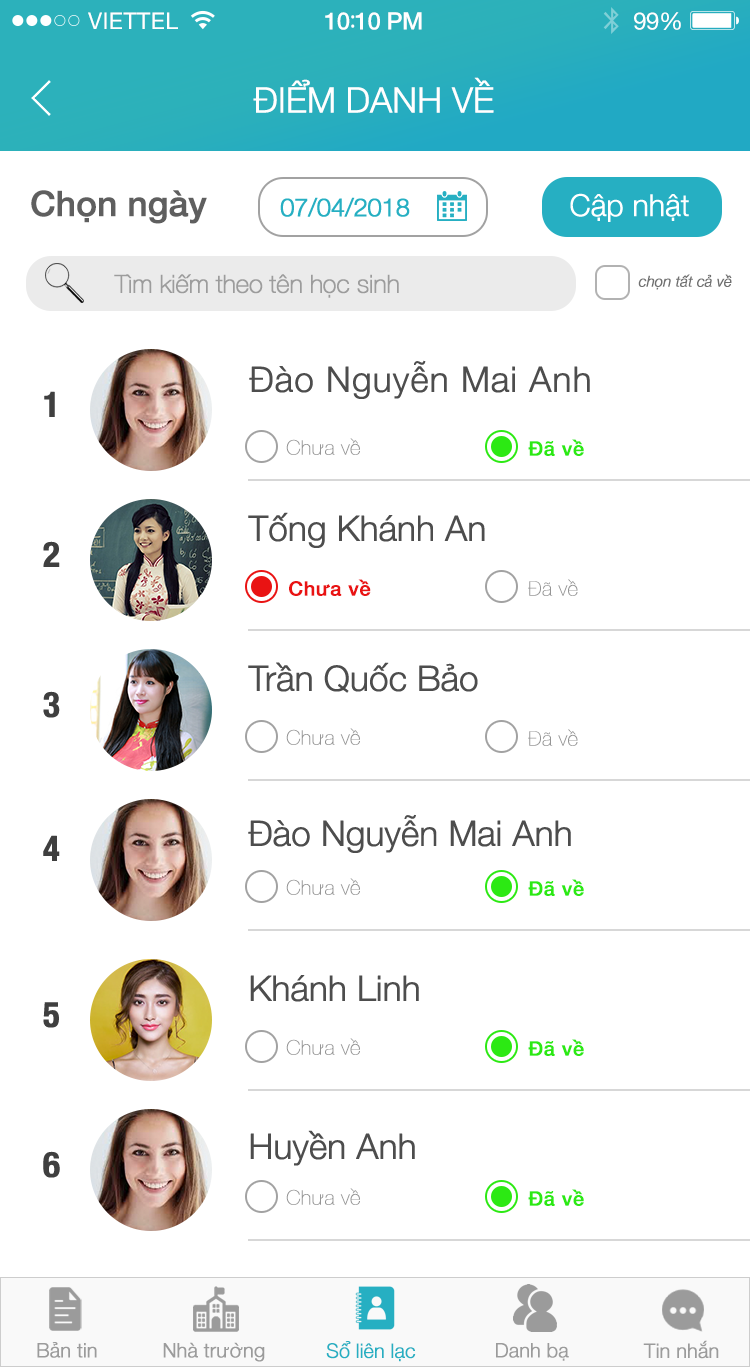
<style>
.page{position:relative;width:750px;height:1367px;background:#ffffff}
.page>*{position:absolute;margin:0}
.t1{font:23px "HelveticaNeue";letter-spacing:0.02em;color:#ffffff}
.t2{font:24px "HelveticaNeue-Medium";letter-spacing:-0.02em;color:#ffffff}
.t3{font:26px "MyriadPro-Regular";letter-spacing:-0.02em;color:#ffffff}
.t4{font:24px "HelveticaNeue";letter-spacing:-0.02em;color:#ffffff}
.t5{font:35px "HelveticaNeue-Light";letter-spacing:-0.02em;color:#ffffff;font-weight:bold}
.t6{font:35px "HelveticaNeue-Medium";letter-spacing:-0.02em;color:#5f5f5f;font-weight:bold}
.t7{font:25px "HelveticaNeue-Light";letter-spacing:-0.02em;color:#26afc2;font-weight:bold}
.t8{font:30px "HelveticaNeue-Light";letter-spacing:-0.02em;color:#ffffff;font-weight:bold}
.t9{font:25px "HelveticaNeue-Thin";letter-spacing:-0.02em;color:#9c9c9c;font-weight:bold}
.t10{font:15px "HelveticaNeue-LightItalic";letter-spacing:-0.02em;color:#707070;font-weight:bold}
.t11{font:35px "HelveticaNeue-Light";letter-spacing:0.01em;color:#4d4d4d;font-weight:bold}
.t12{font:35px "HelveticaNeue-CondensedBold";letter-spacing:0.01em;color:#3f3f3f;font-weight:bold}
.t13{font:20px "HelveticaNeue-UltraLight";letter-spacing:0.01em;color:#959595;font-weight:bold}
.t14{font:20px "HelveticaNeue-Medium";letter-spacing:0.01em;color:#2ce913;font-weight:bold}
.t15{font:35px "HelveticaNeue-Light";letter-spacing:-0.02em;color:#4d4d4d;font-weight:bold}
.t16{font:20px "HelveticaNeue-Medium";letter-spacing:0.01em;color:#e91313;font-weight:bold}
.t17{font:20px "HelveticaNeue-Light";letter-spacing:-0.02em;color:#9b9b9b;font-weight:bold}
.t18{font:20px "HelveticaNeue-Light";letter-spacing:-0.02em;color:#26afc2;font-weight:bold}
</style>
<div class="page">
<p class="t1" style="left:88px;top:12px;width:90px;height:17px">VIETTEL</p>
<p class="t2" style="left:325px;top:12px;width:97px;height:18px">10<span class="t3">:</span>10 PM</p>
<p class="t4" style="left:634px;top:12px;width:47px;height:18px">99%</p>
<p class="t5" style="left:253px;top:77px;width:241px;height:36px">ĐIỂM DANH VỀ</p>
<p class="t6" style="left:31px;top:190px;width:176px;height:34px">Chọn ngày</p>
<p class="t7" style="left:280px;top:197px;width:130px;height:20px">07/04/2018</p>
<p class="t8" style="left:570px;top:193px;width:119px;height:29px">Cập nhật</p>
<p class="t9" style="left:114px;top:274px;width:285px;height:24px">Tìm kiếm theo tên học sinh</p>
<p class="t10" style="left:638px;top:274px;width:94px;height:16px">chọn tất cả về</p>
<p class="t11" style="left:249px;top:360px;width:341px;height:39px">Đào Nguyễn Mai Anh</p>
<p class="t12" style="left:44px;top:391px;width:11px;height:26px">1</p>
<p class="t13" style="left:286px;top:438px;width:74px;height:17px">Chưa về</p>
<p class="t14" style="left:528px;top:439px;width:56px;height:17px">Đã về</p>
<p class="t15" style="left:248px;top:512px;width:237px;height:36px">Tống Khánh An</p>
<p class="t12" style="left:43px;top:541px;width:17px;height:26px">2</p>
<p class="t16" style="left:289px;top:579px;width:82px;height:17px">Chưa về</p>
<p class="t13" style="left:528px;top:579px;width:50px;height:17px">Đã về</p>
<p class="t15" style="left:248px;top:662px;width:230px;height:31px">Trần Quốc Bảo</p>
<p class="t12" style="left:43px;top:691px;width:17px;height:27px">3</p>
<p class="t13" style="left:286px;top:728px;width:74px;height:17px">Chưa về</p>
<p class="t13" style="left:528px;top:729px;width:50px;height:17px">Đã về</p>
<p class="t15" style="left:248px;top:814px;width:323px;height:39px">Đào Nguyễn Mai Anh</p>
<p class="t12" style="left:43px;top:835px;width:17px;height:26px">4</p>
<p class="t13" style="left:286px;top:878px;width:74px;height:17px">Chưa về</p>
<p class="t14" style="left:528px;top:879px;width:56px;height:17px">Đã về</p>
<p class="t15" style="left:250px;top:975px;width:169px;height:27px">Khánh Linh</p>
<p class="t12" style="left:43px;top:1002px;width:16px;height:26px">5</p>
<p class="t13" style="left:286px;top:1038px;width:74px;height:17px">Chưa về</p>
<p class="t14" style="left:528px;top:1039px;width:56px;height:17px">Đã về</p>
<p class="t15" style="left:250px;top:1130px;width:165px;height:36px">Huyền Anh</p>
<p class="t12" style="left:43px;top:1151px;width:17px;height:27px">6</p>
<p class="t13" style="left:286px;top:1188px;width:74px;height:17px">Chưa về</p>
<p class="t14" style="left:528px;top:1189px;width:56px;height:17px">Đã về</p>
<p class="t17" style="left:37px;top:1342px;width:60px;height:16px">Bản tin</p>
<p class="t17" style="left:163px;top:1342px;width:102px;height:20px">Nhà trường</p>
<p class="t18" style="left:326px;top:1341px;width:90px;height:21px">Sổ liên lạc</p>
<p class="t17" style="left:496px;top:1343px;width:73px;height:18px">Danh bạ</p>
<p class="t17" style="left:643px;top:1340px;width:76px;height:19px">Tin nhắn</p>
</div>
